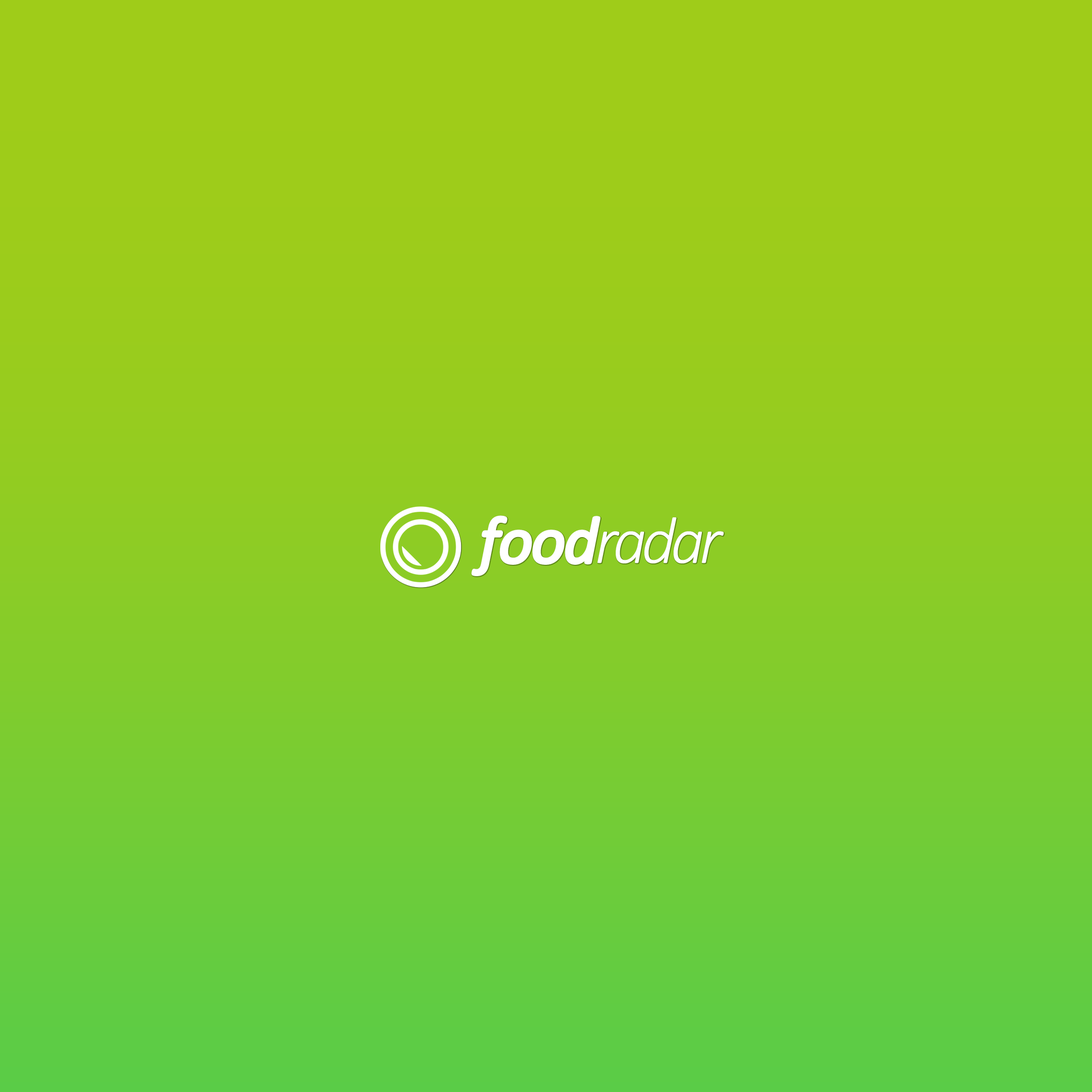
<style>
.page{position:relative;width:1092px;height:1092px}
.page>*{position:absolute;margin:0}
.t1{font:67px "Calibri-LightItalic";letter-spacing:-0.075em;color:#ffffff}
.t2{font:67px "Calibri-Italic";letter-spacing:-0.05em;color:#ffffff;font-weight:bold}
.t3{font:67px "Calibri-Italic";letter-spacing:-0.075em;color:#ffffff;font-weight:bold}
</style>
<div class="page">
<p class="t1" style="left:471px;top:515px;width:253px;height:61px"><span class="t2">foo</span><span class="t3">d</span>radar</p>
</div>
